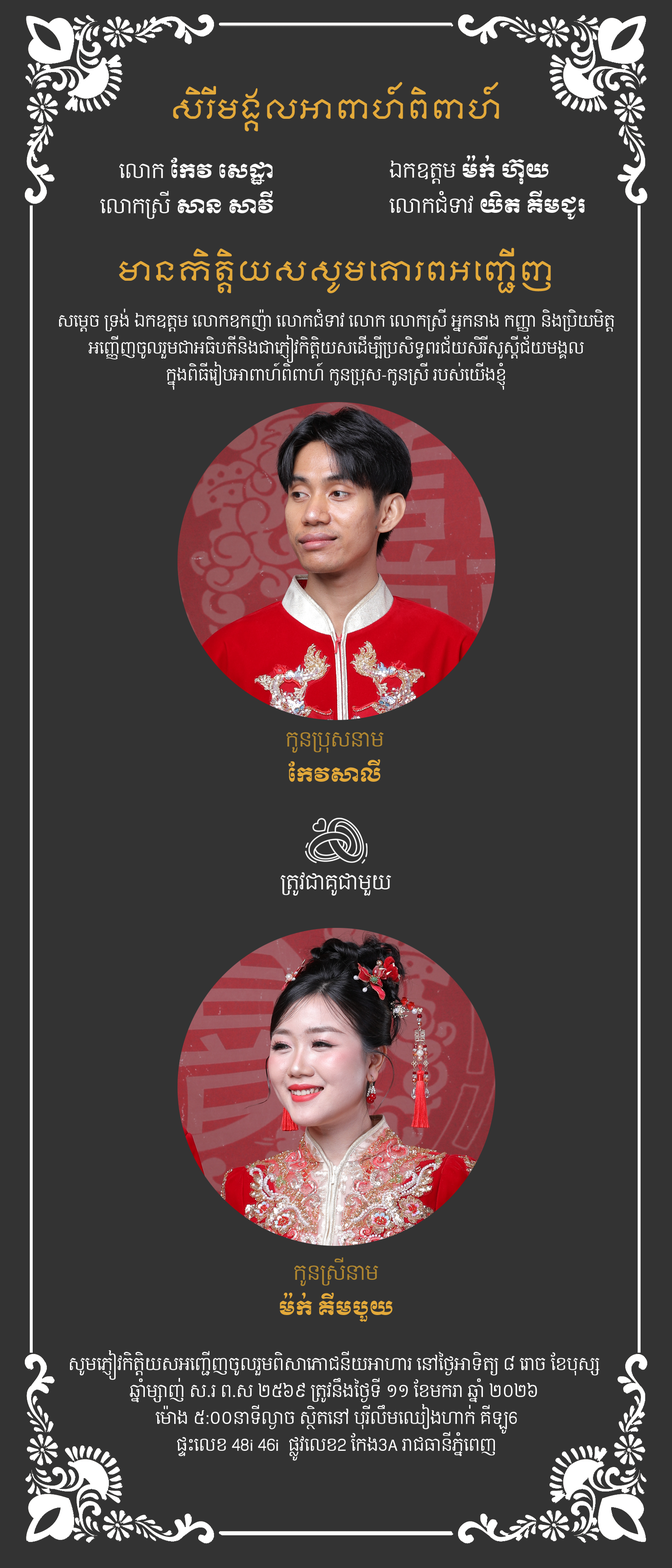
<style>
.page{position:relative;width:672px;height:1568px;background:#333333}
.page>*{position:absolute;margin:0}
.t1{font:26.9px/3.1px "KhmerOSMoulpali";color:#e3a93a}
.t2{font:19.5px/35.2px "KhmerOSMoul";color:#ffffff}
.t3{font:19.5px/35.2px "KhmerOSContent";color:#ffffff}
.t4{font:15.7px/26.9px "KhmerOSContent";color:#ffffff}
.t5{font:19.5px/35.2px "KhmerOSContent";color:#b1872f}
.t6{font:19.5px/35.2px "KhmerOSMoul";color:#e3a93a}
.t7{font:19.5px "KhmerOSContent";color:#ffffff}
.t8{font:16.6px/26.9px "KhmerOSContent";color:#ffffff}
.t9{font:16.6px/26.9px "MyriadPro-Regular";color:#ffffff}
</style>
<div class="page">
<p class="t1" style="left:173px;top:82px;width:326px;height:50px;text-align:center">សិរីមង្គលអាពាហ៍ពិពាហ៍</p>
<p class="t2" style="left:100px;top:157px;width:174px;height:62px;text-align:right"><span class="t3">លោក</span> កែវ សេដ្ឋា<br><span class="t3">លោកស្រី </span>សាន សាវី</p>
<p class="t2" style="left:390px;top:155px;width:195px;height:64px"><span class="t3">ឯកឧត្តម </span>ម៉ក់ ហ៊ុយ<br><span class="t3">លោកជំទាវ </span>យិត គីមជូរ</p>
<p class="t1" style="left:119px;top:248px;width:432px;height:46px;text-align:center">មានកិត្តិយសសូមគោរពអញ្ជើញ</p>
<p class="t4" style="left:59px;top:308px;width:555px;height:82px;text-align:center">សម្ដេច ទ្រង់ ឯកឧត្ដម លោកឧកញ៉ា លោកជំទាវ លោក លោកស្រី អ្នកនាង កញ្ញា និងប្រិយមិត្ត<br>អញ្ញើញចូលរួមជាអធិបតីនិងជាភ្ញៀវកិត្តិយសដើម្បីប្រសិទ្ធពរជ័យសិរីសួស្ដីជ័យមង្គល<br>ក្នុងពិធីរៀបអាពាហ៍ពិពាហ៍ កូនប្រុស-កូនស្រី របស់យើងខ្ញុំ</p>
<p class="t5" style="left:287px;top:732px;width:97px;height:50px;text-align:center">កូនប្រុសនាម<br><span class="t6">កែវសាលី</span></p>
<p class="t7" style="left:281px;top:872px;width:110px;height:24px">ត្រូវជាគូ​ជាមួយ</p>
<p class="t6" style="left:280px;top:1257px;width:113px;height:65px;text-align:center"><span class="t5">កូនស្រីនាម<br></span>ម៉ក់​ គីមបួយ</p>
<p class="t8" style="left:70px;top:1350px;width:530px;height:111px;text-align:center">សូមភ្ញៀវកិត្តិយសអញ្ជើញចូលរួមពិសាភោជនីយអាហារ នៅថ្ងៃអាទិត្យ ៨ រោច ខែបុស្ស <br>ឆ្នាំម្សាញ់ ស.រ ព.ស ២៥៦៩ ត្រូវនឹងថ្ងៃទី ១១ ខែមករា ឆ្នាំ ២០២៦ <br> ម៉ោង ៥:០០នាទីល្ងាច ស្ថិតនៅ បុរីលឹមឈៀងហាក់ គីឡូ6 <br>ផ្ទះលេខ 48<span class="t9">i</span> 46<span class="t9">i</span>  ផ្លូវលេខ2 កែង3<span class="t9">A</span> រាជធានីភ្នំពេញ</p>
</div>
